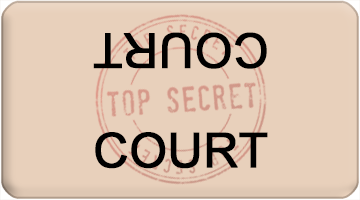
<style>
.page{position:relative;width:360px;height:200px;background:#e8d0bb}
.page>*{position:absolute;margin:0}
.t1{font:48px "ArialMT";color:#000000;font-weight:bold}
</style>
<div class="page">
<p class="t1" style="left:93px;top:32px;width:174px;height:37px;rotate:180deg">COURT</p>
<p class="t1" style="left:95px;top:132px;width:173px;height:37px">COURT</p>
</div>
